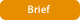
<style>
.page{position:relative;width:80px;height:20px;background:#e68d00}
.page>*{position:absolute;margin:0}
.t1{font:11px "MyriadPro-Semibold";color:#ffffff}
</style>
<div class="page">
<p class="t1" style="left:28px;top:5px;width:22px;height:8px">Brief</p>
</div>
